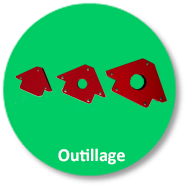
<style>
.page{position:relative;width:185px;height:185px;background:#00cc66}
.page>*{position:absolute;margin:0}
.t1{font:18px "Calibri-Bold";color:#ffffff}
</style>
<div class="page">
<p class="t1" style="left:58px;top:148px;width:67px;height:17px">Outillage</p>
</div>
